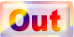
<style>
.page{position:relative;width:74px;height:37px}
.page>*{position:absolute;margin:0}
.t1{font:30.4px "Arial-Black";scale:0.9 1}
</style>
<div class="page">
<p class="t1" style="left:9px;top:9px;width:52px;height:23px">Out</p>
</div>
